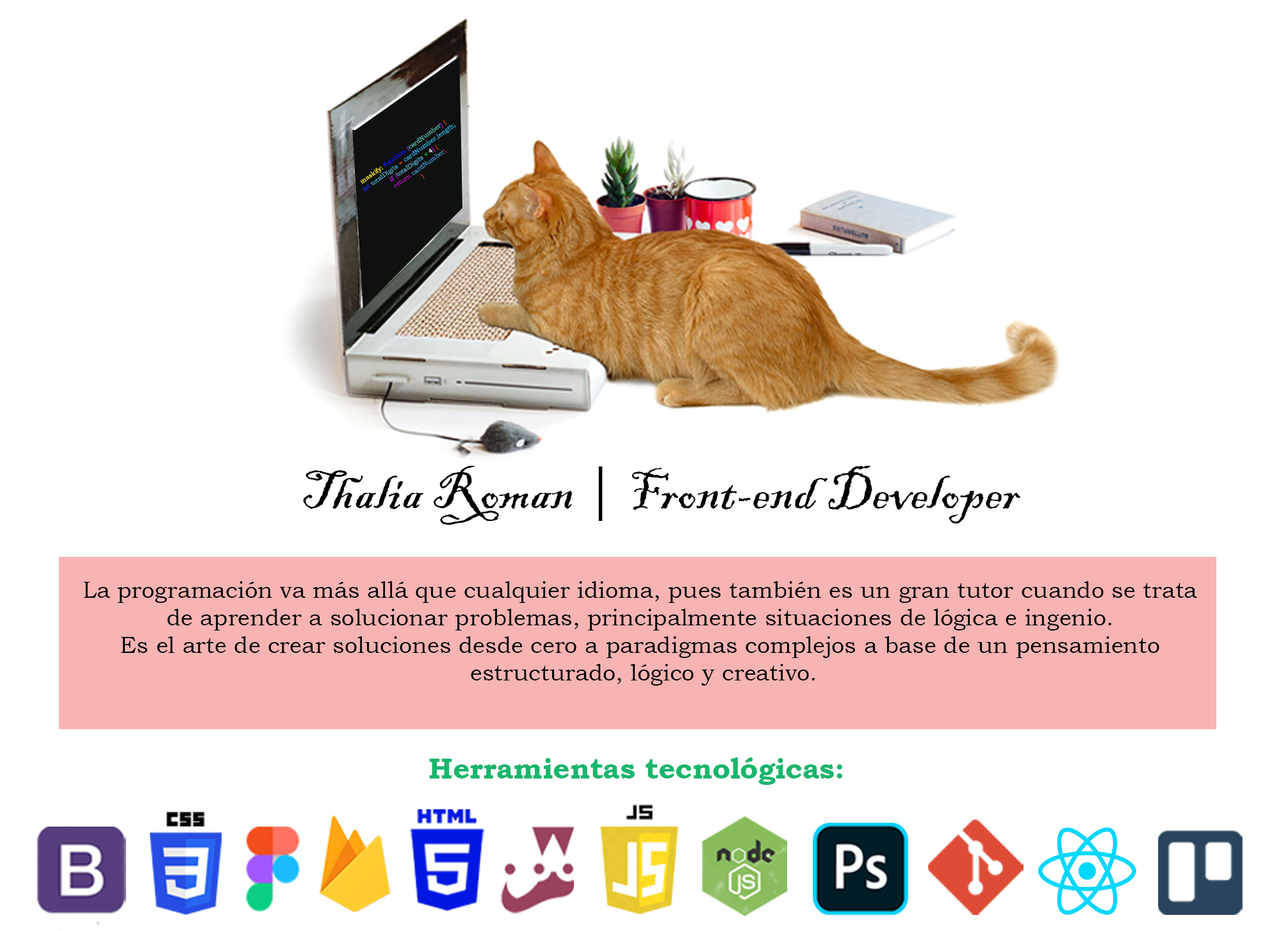
<style>
.page{position:relative;width:1281px;height:931px;background:#ffffff}
.page>*{position:absolute;margin:0}
.t1{font:6.4px "BookmanOldStyle";color:#31aedf}
.t2{font:6.4px "BookmanOldStyle";color:#f94012}
.t3{font:6.4px "BookmanOldStyle";color:#f9f312}
.t4{font:6.4px "BookmanOldStyle";color:#181ce6}
.t5{font:6.4px "BookmanOldStyle";color:#0f11f5}
.t6{font:6.4px "BookmanOldStyle";color:#8b2bd0}
.t7{font:6.4px "BookmanOldStyle";color:#5bbaac}
.t8{font:6.4px "BookmanOldStyle";color:#a31ae7}
.t9{font:6.4px "BookmanOldStyle";color:#1e24ef}
.t10{font:6.4px "BookmanOldStyle";color:#47aac1}
.t11{font:6.4px "BookmanOldStyle";color:#ac29d9}
.t12{font:6.4px "BookmanOldStyle";color:#8d189e}
.t13{font:6.4px "BookmanOldStyle";color:#79a0da}
.t14{font:6.4px "BookmanOldStyle";color:#5aa9c8}
.t15{font:6.4px "BookmanOldStyle";color:#0ee511}
.t16{font:6.4px "BookmanOldStyle";color:#ffffff}
.t17{font:6.4px "BookmanOldStyle";color:#c40bde}
.t18{font:6.4px "BookmanOldStyle";color:#ad12b2}
.t19{font:6.4px "BookmanOldStyle";color:#3f97c0}
.t20{font:56.8px "BlackadderITC-Regular";color:#000000}
.t21{font:56.8px "BookAntiqua";color:#000000}
.t22{font:23.1px "BookmanOldStyle";color:#040507}
.t23{font:29.2px "BookmanOldStyle-Bold";color:#18b66c}
</style>
<div class="page">
<p class="t1" style="left:361px;top:119px;width:95px;height:73px;text-align:center;rotate:-36deg"><span class="t2">  </span><span class="t3">maskify: </span><span class="t4">f</span><span class="t5">unction </span><span class="t6">(</span><span class="t7">cardNumber</span><span class="t8">) </span><span class="t2">{<br>    </span><span class="t9">let </span><span class="t10">totalDigits </span><span class="t2">= </span>cardNumber.length;<br>    <span class="t11">if </span><span class="t12">(</span><span class="t13">t</span><span class="t14">otalDigits </span><span class="t15">&lt; </span><span class="t16">4</span><span class="t17">)</span><span class="t2"> {<br>      </span><span class="t18">return </span><span class="t19">cardNumber</span><span class="t2">;<br>    }</span></p>
<p class="t20" style="left:303px;top:462px;width:717px;height:63px">Thalia Roman <span class="t21">|</span> Front-end Developer</p>
<p class="t22" style="left:83px;top:581px;width:1114px;height:104px;text-align:center">La programación va más allá que cualquier idioma, pues también es un gran tutor cuando se trata <br>de aprender a solucionar problemas, principalmente situaciones de lógica e ingenio. <br>Es el arte de crear soluciones desde cero a paradigmas complejos a base de un pensamiento <br>estructurado, lógico y creativo.</p>
<p class="t23" style="left:429px;top:757px;width:413px;height:28px">Herramientas tecnológicas:</p>
</div>
